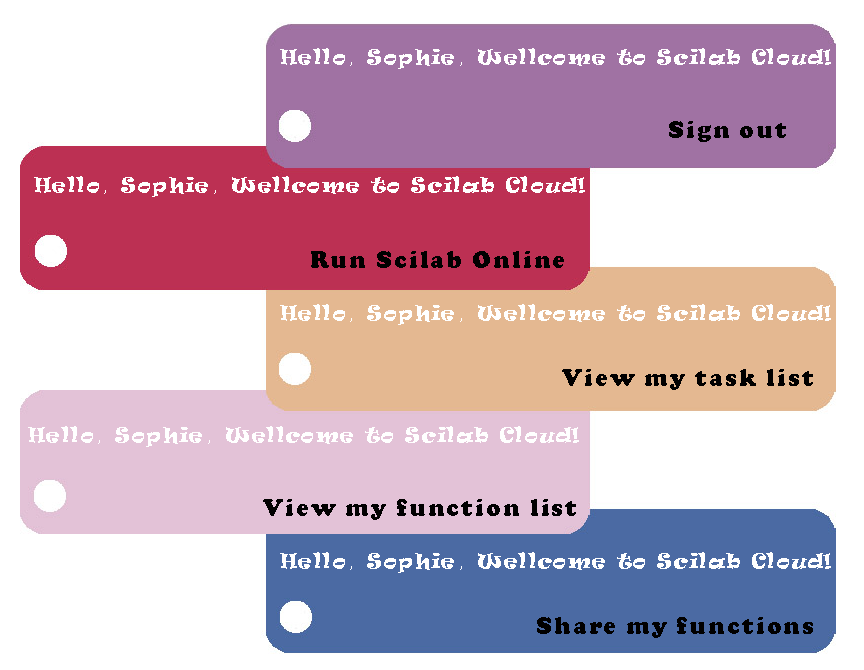
<style>
.page{position:relative;width:864px;height:670px;background:#ffffff}
.page>*{position:absolute;margin:0}
.t1{font:18.8px "Ravie";letter-spacing:0.075em;color:#ffffff}
.t2{font:18.8px "STXingkai";letter-spacing:0.075em;color:#ffffff}
.t3{font:25px "CooperBlack";letter-spacing:0.075em;color:#010000}
</style>
<div class="page">
<p class="t1" style="left:280px;top:48px;width:551px;height:21px">Hello<span class="t2">，</span>Sophie<span class="t2">，</span>Wellcome to Scilab Cloud!</p>
<p class="t3" style="left:669px;top:121px;width:117px;height:21px">Sign out</p>
<p class="t1" style="left:34px;top:176px;width:551px;height:21px">Hello<span class="t2">，</span>Sophie<span class="t2">，</span>Wellcome to Scilab Cloud!</p>
<p class="t3" style="left:311px;top:251px;width:253px;height:17px">Run Scilab Online</p>
<p class="t1" style="left:280px;top:304px;width:551px;height:21px">Hello<span class="t2">，</span>Sophie<span class="t2">，</span>Wellcome to Scilab Cloud!</p>
<p class="t3" style="left:562px;top:369px;width:251px;height:21px">View my task list</p>
<p class="t1" style="left:28px;top:426px;width:551px;height:21px">Hello<span class="t2">，</span>Sophie<span class="t2">，</span>Wellcome to Scilab Cloud!</p>
<p class="t3" style="left:263px;top:499px;width:313px;height:21px">View my function list</p>
<p class="t1" style="left:280px;top:552px;width:551px;height:21px">Hello<span class="t2">，</span>Sophie<span class="t2">，</span>Wellcome to Scilab Cloud!</p>
<p class="t3" style="left:537px;top:617px;width:276px;height:21px">Share my functions</p>
</div>
